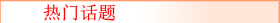
<style>
.page{position:relative;width:280px;height:23px;background:#ffffff}
.page>*{position:absolute;margin:0}
.t1{font:18px "SimSun";color:#ff0000}
</style>
<div class="page">
<p class="t1" style="left:43px;top:4px;width:73px;height:17px">热门话题</p>
</div>
